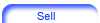
<style>
.page{position:relative;width:100px;height:23px;background:#ffffff}
.page>*{position:absolute;margin:0}
.t1{font:11px "ArialMT";color:#092ff6}
</style>
<div class="page">
<p class="t1" style="left:37px;top:12px;width:18px;height:8px">Sell</p>
</div>
